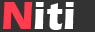
<style>
.page{position:relative;width:95px;height:32px;background:#333333}
.page>*{position:absolute;margin:0}
.t1{font:40px "ErasITC-Bold";color:#ffffff}
.t2{font:40px "ErasITC-Bold";color:#ff3d4f}
</style>
<div class="page">
<p class="t1" style="left:3px;top:2px;width:71px;height:28px"><span class="t2">N</span>iti</p>
</div>
